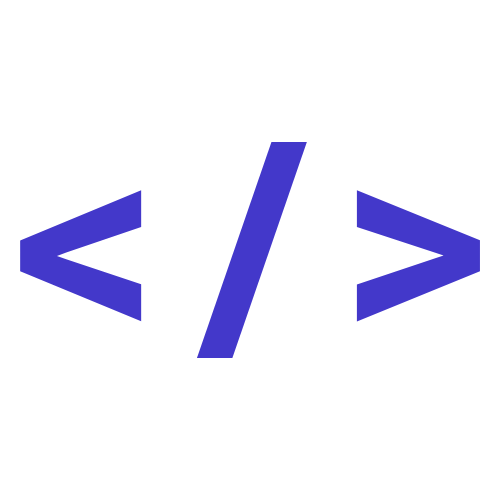
<style>
.page{position:relative;width:500px;height:500px;background:#ffffff}
.page>*{position:absolute;margin:0}
.t1{font:280px "RobotoMono-Bold";color:#4338ca}
</style>
<div class="page">
<p class="t1" style="left:20px;top:141px;width:460px;height:218px">&lt;/&gt;</p>
</div>
